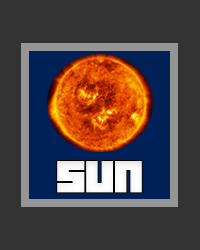
<style>
.page{position:relative;width:200px;height:250px;background:#333333}
.page>*{position:absolute;margin:0}
.t1{font:45.4px "RobotRadicals";color:#ffffff}
</style>
<div class="page">
<p class="t1" style="left:57px;top:161px;width:85px;height:32px">sun</p>
</div>
